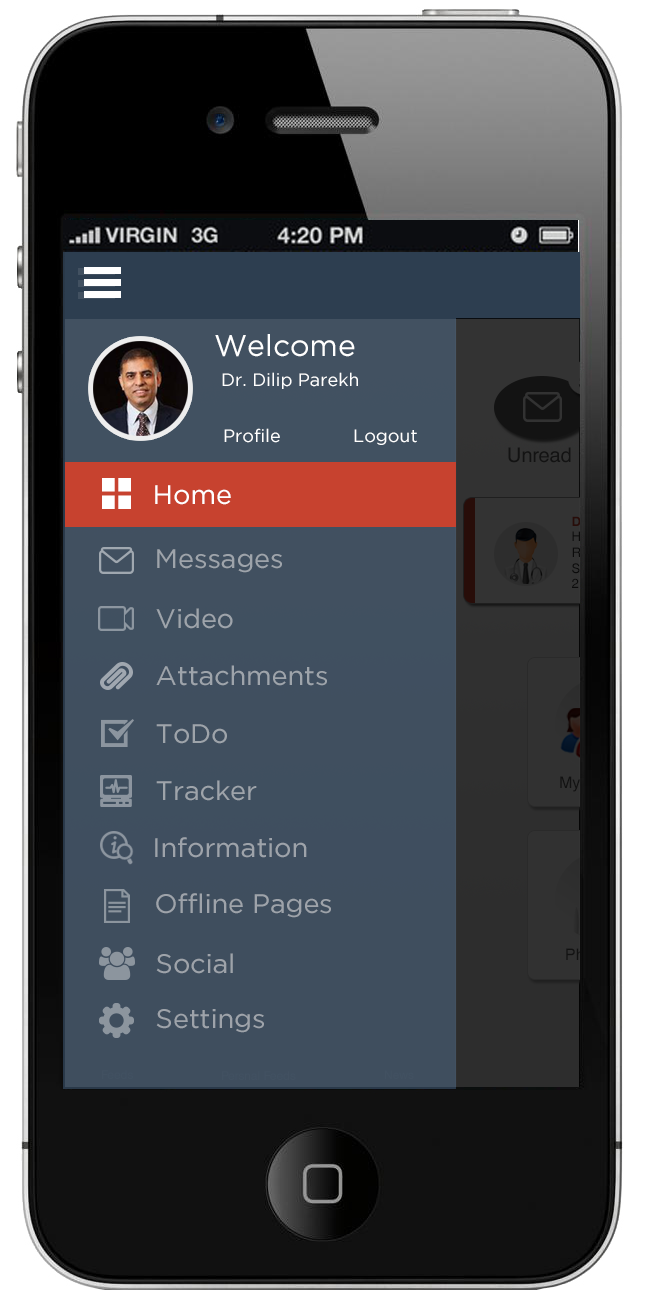
<style>
.page{position:relative;width:648px;height:1300px}
.page>*{position:absolute;margin:0}
.t1{font:30px "GothamBook";color:#ffffff}
.t2{font:18px "GothamBook";color:#ffffff}
.t3{font:26.8px "GothamBook";color:#ffffff}
.t4{font:26.8px "GothamBook";color:#9ea4ab}
.t5{font:26.8px "GothamBook";color:#9ea4aa}
.t6{font:26.8px "GothamBook";color:#9ea3aa}
</style>
<div class="page">
<p class="t1" style="left:215px;top:334px;width:140px;height:23px">Welcome</p>
<p class="t2" style="left:222px;top:372px;width:136px;height:17px">Dr. Dilip Parekh</p>
<p class="t2" style="left:224px;top:428px;width:56px;height:15px">Profile</p>
<p class="t2" style="left:354px;top:429px;width:63px;height:16px">Logout</p>
<p class="t3" style="left:155px;top:485px;width:76px;height:20px">Home</p>
<p class="t4" style="left:157px;top:549px;width:125px;height:24px">Messages</p>
<p class="t4" style="left:156px;top:608px;width:77px;height:21px">Video</p>
<p class="t4" style="left:156px;top:665px;width:171px;height:21px">Attachments</p>
<p class="t5" style="left:156px;top:724px;width:71px;height:20px">ToDo</p>
<p class="t5" style="left:156px;top:780px;width:101px;height:21px">Tracker</p>
<p class="t6" style="left:155px;top:837px;width:152px;height:21px">Information</p>
<p class="t6" style="left:156px;top:893px;width:175px;height:25px">Offline Pages</p>
<p class="t6" style="left:156px;top:953px;width:77px;height:21px">Social</p>
<p class="t6" style="left:156px;top:1009px;width:108px;height:24px">Settings</p>
</div>
